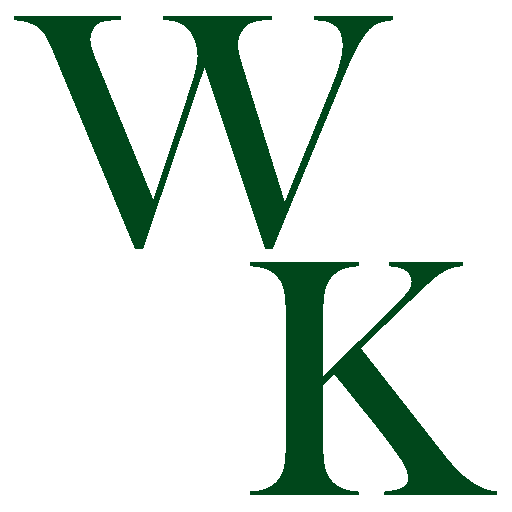
<style>
.page{position:relative;width:512px;height:512px;background:#ffffff}
.page>*{position:absolute;margin:0}
.t1{font:350px "BaskOldFace";color:#00471b}
</style>
<div class="page">
<p class="t1" style="left:14px;top:16px;width:379px;height:233px">W</p>
<p class="t1" style="left:250px;top:262px;width:247px;height:233px">K</p>
</div>
